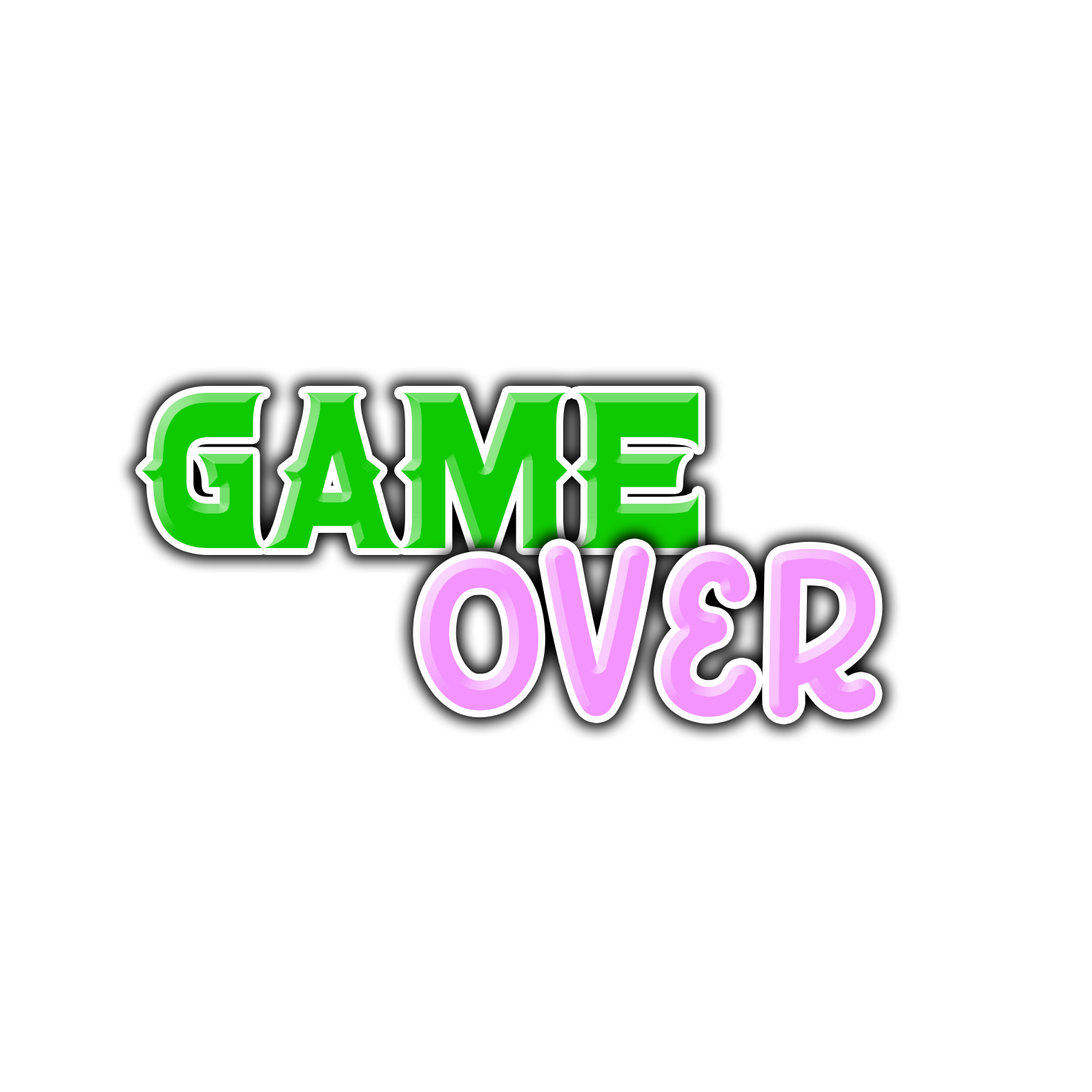
<style>
.page{position:relative;width:1092px;height:1092px;background:#ffffff}
.page>*{position:absolute;margin:0}
.t1{font:226.8px "ConfettiWestern";color:#0eca00}
.t2{font:240.3px "SweetCupcakeDemo";color:#f494ff}
</style>
<div class="page">
<p class="t1" style="left:142px;top:393px;width:557px;height:155px">game</p>
<p class="t2" style="left:420px;top:545px;width:456px;height:173px">OVEr</p>
</div>
